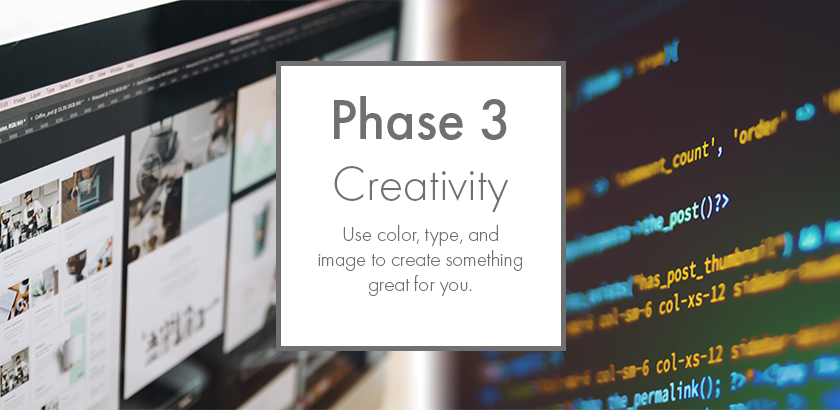
<style>
.page{position:relative;width:840px;height:410px;background:#ffffff}
.page>*{position:absolute;margin:0}
.t1{font:58.3px "FuturaPT-Medium";color:#707070}
.t2{font:50px "FuturaPT-Light";color:#707070}
.t3{font:20.8px "FuturaPT-Light";color:#707070}
</style>
<div class="page">
<p class="t1" style="left:334px;top:96px;width:173px;height:44px">Phase 3</p>
<p class="t2" style="left:334px;top:166px;width:175px;height:46px">Creativity</p>
<p class="t3" style="left:318px;top:225px;width:204px;height:71px;text-align:center">Use color, type, and image to create something great for you.</p>
</div>
